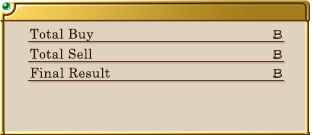
<style>
.page{position:relative;width:312px;height:135px;background:#dfd3c0}
.page>*{position:absolute;margin:0}
.t1{font:13.3px "CenturySchoolbook";letter-spacing:0.025em;color:#321a02}
</style>
<div class="page">
<p class="t1" style="left:30px;top:28px;width:64px;height:14px">Total Buy</p>
<p class="t1" style="left:30px;top:48px;width:63px;height:11px">Total Sell</p>
<p class="t1" style="left:30px;top:67px;width:80px;height:11px">Final Result</p>
</div>
